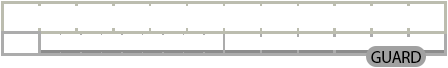
<style>
.page{position:relative;width:448px;height:68px;background:#ffffff}
.page>*{position:absolute;margin:0}
.t1{font:16.5px "MyriadPro-Regular";color:#000000}
</style>
<div class="page">
<p class="t1" style="left:371px;top:51px;width:50px;height:12px">GUARD</p>
</div>
